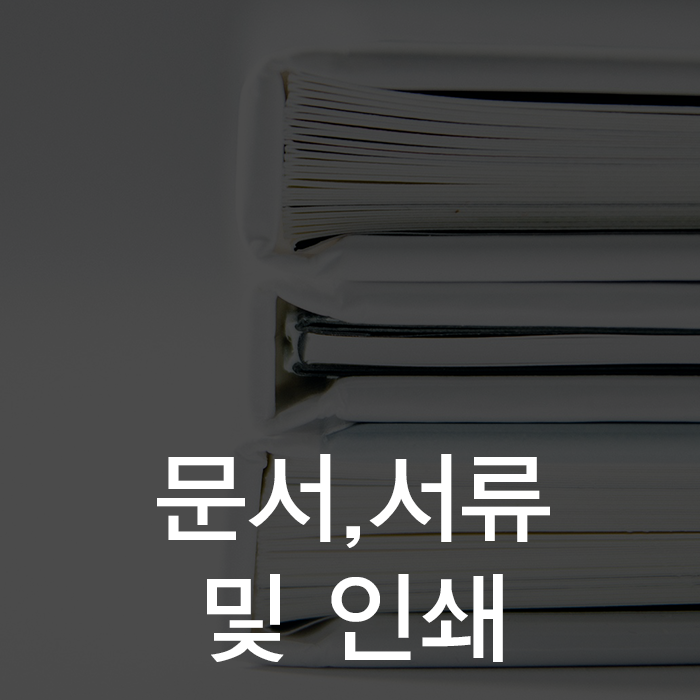
<style>
.page{position:relative;width:700px;height:700px}
.page>*{position:absolute;margin:0}
.t1{font:100px "YDIYGO330";color:#ffffff}
</style>
<div class="page">
<p class="t1" style="left:157px;top:454px;width:393px;height:208px;text-align:center">문서,서류<br>및 인쇄</p>
</div>
